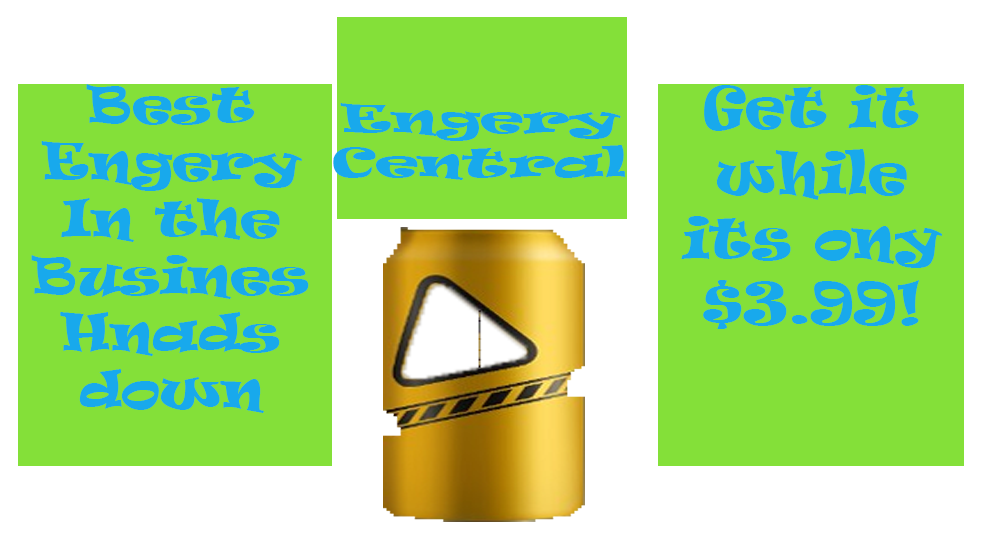
<style>
.page{position:relative;width:985px;height:554px;background:#84e039}
.page>*{position:absolute;margin:0}
.t1{font:47.5px "Ravie";color:#18a9ec;scale:1.15 1}
.t2{font:54.4px "Ravie";color:#18a9ec}
.t3{font:36.8px "Ravie";color:#18a9ec;scale:1.6 1}
</style>
<div class="page">
<p class="t1" style="left:31px;top:84px;width:278px;height:329px;text-align:center">Best Engery In the Busines Hnads down</p>
<p class="t2" style="left:681px;top:85px;width:261px;height:244px;text-align:center">Get it while its ony $3.99!</p>
<p class="t3" style="left:333px;top:103px;width:292px;height:77px;text-align:center">Engery Central</p>
</div>
